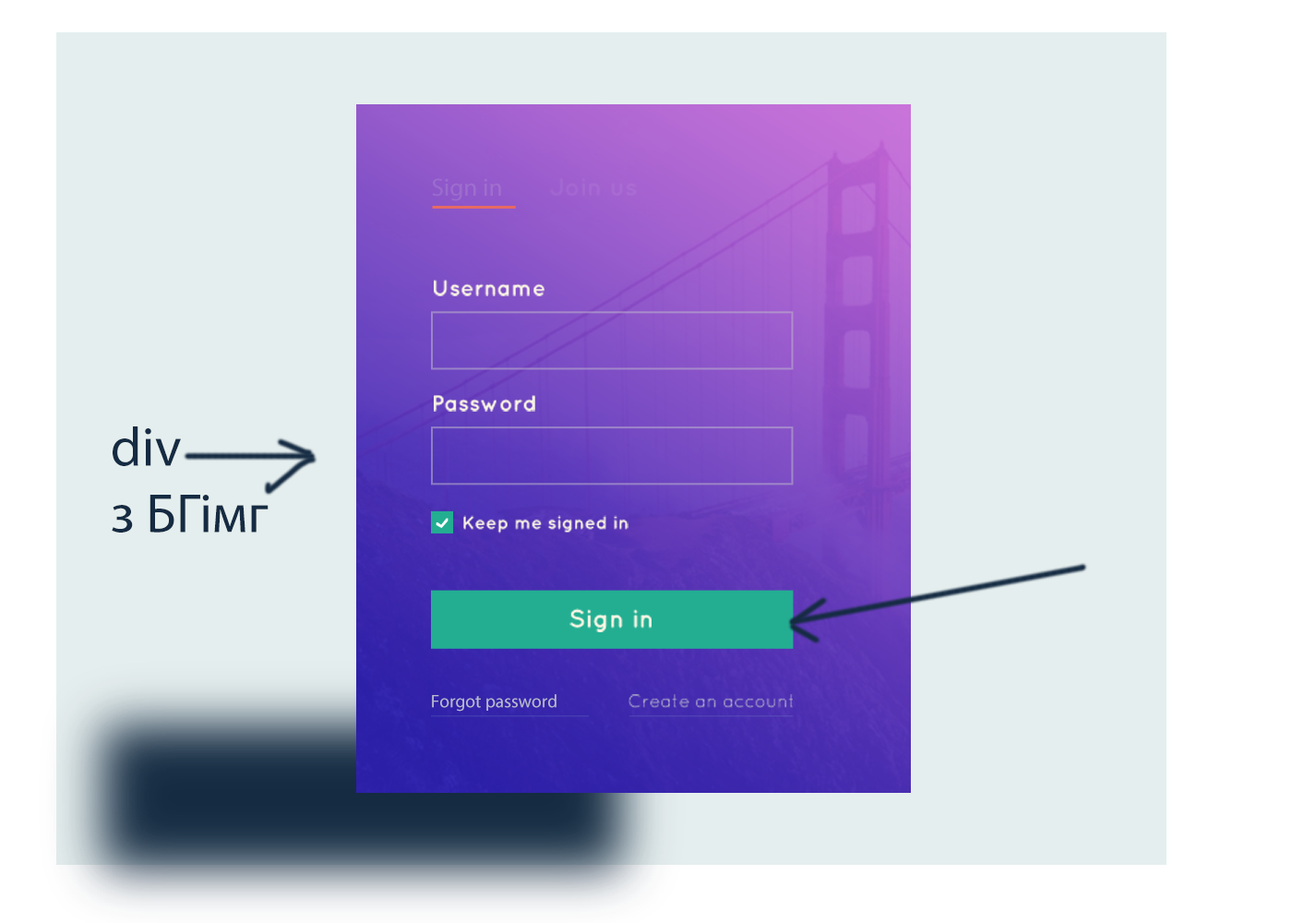
<style>
.page{position:relative;width:1292px;height:923px;background:#e5eeee}
.page>*{position:absolute;margin:0}
.t1{font:25px "MyriadPro-Regular";color:#9d6ecd}
.t2{font:25px "Quicksand-Bold";color:#a66ad2}
.t3{font:22.2px "Quicksand-Bold";color:#fbf6e4}
.t4{font:55.3px "MyriadPro-Regular";color:#152b42}
.t5{font:18px "Quicksand-Bold";color:#fbf6e4}
.t6{font:25px "Quicksand-Bold";color:#fbf6e4}
.t7{font:18px "MyriadPro-Regular";color:#b9b9cc}
.t8{font:18px "Quicksand-Regular";color:#b9b9cc}
</style>
<div class="page">
<p class="t1" style="left:432px;top:178px;width:69px;height:23px">Sign in</p>
<p class="t2" style="left:550px;top:178px;width:87px;height:18px">Join us</p>
<p class="t3" style="left:434px;top:280px;width:111px;height:16px">Username</p>
<p class="t3" style="left:434px;top:395px;width:101px;height:17px">Password</p>
<p class="t4" style="left:112px;top:426px;width:157px;height:107px">div<br>з БГімг</p>
<p class="t5" style="left:463px;top:515px;width:165px;height:18px">Keep me signed in</p>
<p class="t6" style="left:569px;top:608px;width:83px;height:24px">Sign in</p>
<p class="t7" style="left:432px;top:694px;width:125px;height:18px">Forgot password</p>
<p class="t8" style="left:628px;top:694px;width:165px;height:14px">Create an account</p>
</div>
